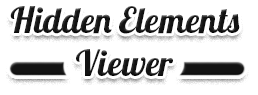
<style>
.page{position:relative;width:258px;height:95px;background:#ffffff}
.page>*{position:absolute;margin:0}
.t1{font:36px "Lobster1.4";color:#131313}
</style>
<div class="page">
<p class="t1" style="left:10px;top:6px;width:230px;height:70px;text-align:center">Hidden Elements Viewer</p>
</div>
